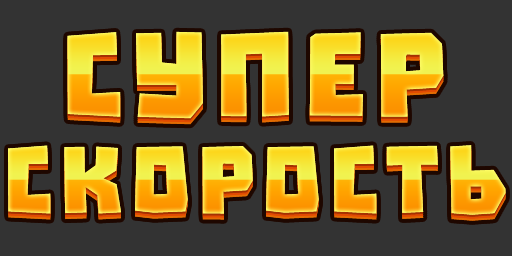
<style>
.page{position:relative;width:512px;height:256px;background:#333333}
.page>*{position:absolute;margin:0}
.t1{font:133.3px "Troika";letter-spacing:0.06em}
.t2{font:106.7px "Troika";letter-spacing:0.06em}
</style>
<div class="page">
<p class="t1" style="left:67px;top:31px;width:377px;height:88px">СУПЕР</p>
<p class="t2" style="left:8px;top:145px;width:498px;height:70px">СКОРОСТЬ</p>
</div>
